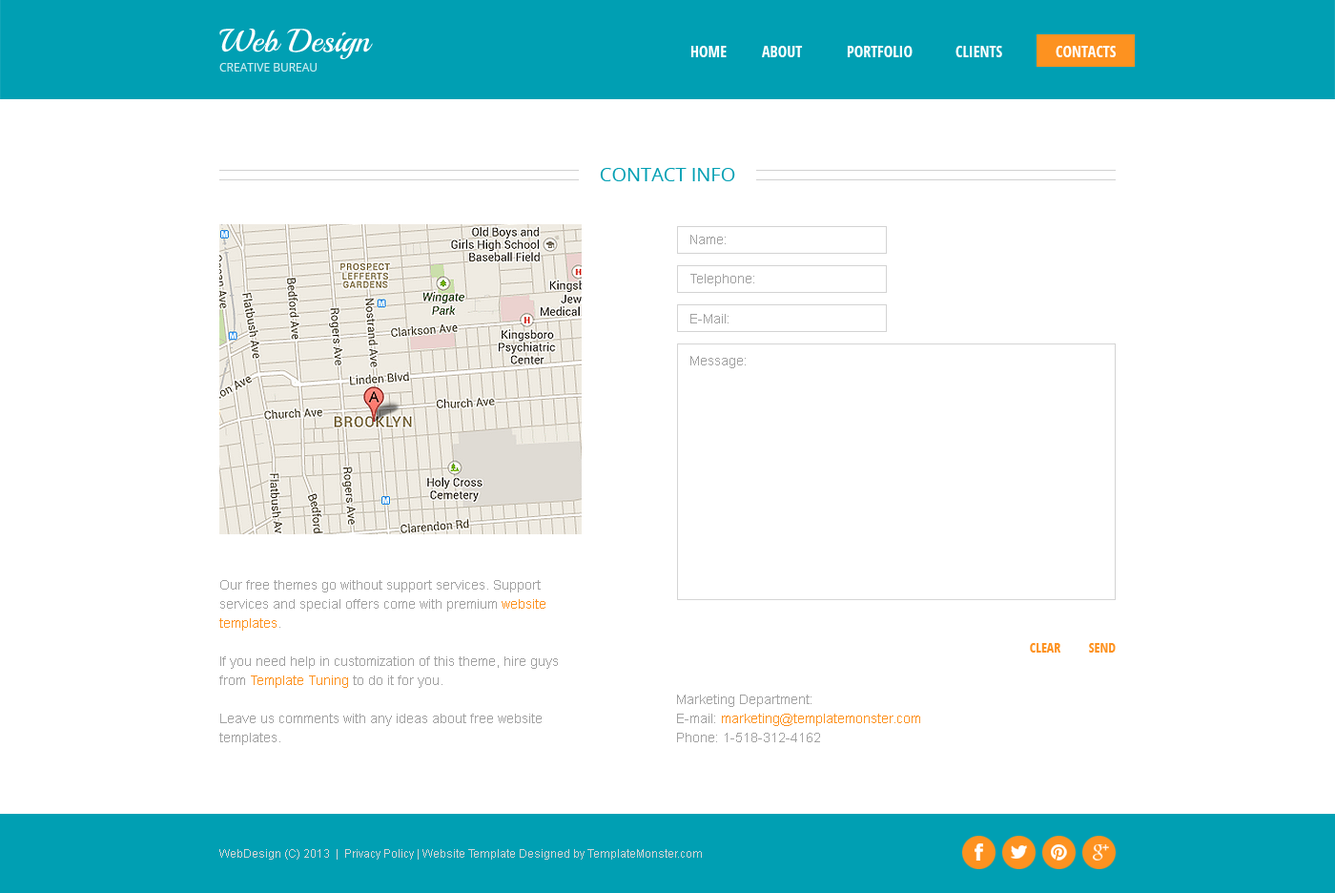
<style>
.page{position:relative;width:1335px;height:893px;background:#ffffff}
.page>*{position:absolute;margin:0}
.t1{font:32.4px "Playball-Regular";color:#ffffff}
.t2{font:15.3px "OpenSans-CondensedBold";color:#ffffff;text-transform:uppercase}
.t3{font:11.4px "OpenSans";color:#cfedf1;text-transform:uppercase}
.t4{font:19.1px "OpenSans";color:#009fb3;text-transform:uppercase}
.t5{font:13.4px "ArialMT";color:#a1a1a1}
.t6{font:13.4px/19.1px "ArialMT";color:#a1a1a1}
.t7{font:13.4px/19.1px "ArialMT";color:#fd9220}
.t8{font:13.4px "OpenSans-CondensedBold";color:#fd9220;text-transform:uppercase}
.t9{font:11.4px "ArialMT";color:#d5d5d5}
.t10{font:11.4px "ArialMT";color:#d7d7d7}
.t11{font:11.4px "ArialMT";color:#d7d7d7;text-transform:uppercase}
</style>
<div class="page">
<p class="t1" style="left:219px;top:29px;width:154px;height:30px">Web Design</p>
<p class="t2" style="left:691px;top:46px;width:36px;height:11px">Home</p>
<p class="t2" style="left:762px;top:46px;width:41px;height:11px">about</p>
<p class="t2" style="left:847px;top:46px;width:66px;height:11px">Portfolio</p>
<p class="t2" style="left:956px;top:46px;width:47px;height:11px">Clients</p>
<p class="t2" style="left:1056px;top:46px;width:61px;height:11px">Contacts</p>
<p class="t3" style="left:219px;top:63px;width:98px;height:9px">Creative Bureau</p>
<p class="t4" style="left:600px;top:168px;width:135px;height:13px">contact info</p>
<p class="t5" style="left:691px;top:235px;width:35px;height:9px">Name:</p>
<p class="t5" style="left:691px;top:274px;width:64px;height:12px">Telephone:</p>
<p class="t5" style="left:691px;top:314px;width:38px;height:9px">E-Mail:</p>
<p class="t5" style="left:691px;top:356px;width:55px;height:12px">Message:</p>
<p class="t6" style="left:219px;top:580px;width:339px;height:165px">Our free themes go without support services. Support services and special offers come with premium<span class="t7"> website templates</span>.<br><br>If you need help in customization of this theme, hire guys from <span class="t7">Template Tuning</span> to do it for you.<br><br>Leave us comments with any ideas about free website templates.</p>
<p class="t8" style="left:1030px;top:643px;width:32px;height:9px">Clear</p>
<p class="t8" style="left:1089px;top:643px;width:27px;height:9px">Send</p>
<p class="t6" style="left:677px;top:694px;width:244px;height:48px">Marketing Department:<br>E-mail: <span class="t7">marketing@templatemonster.com<br></span>Phone: 1-518-312-4162</p>
<p class="t9" style="left:219px;top:849px;width:483px;height:10px"><span class="t10">WebDesign</span><span class="t11"> (c) 2013  |  </span><span class="t10">Privacy Policy </span>| Website Template Designed by TemplateMonster.com</p>
</div>
